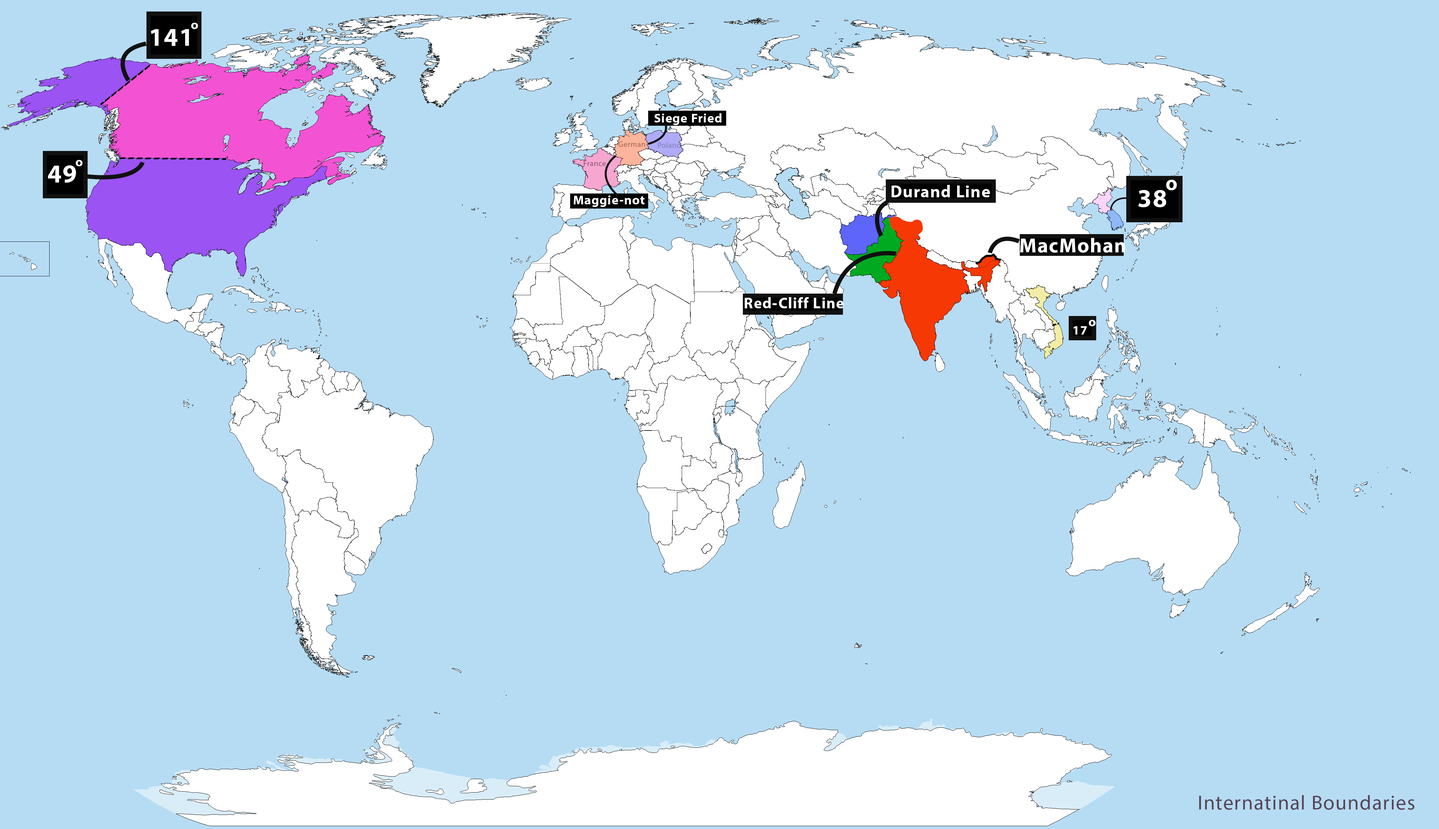
<style>
.page{position:relative;width:1439px;height:829px;background:#b6dcf4}
.page>*{position:absolute;margin:0}
.t1{font:25.6px "MyriadHebrew-Bold";letter-spacing:0.04em;color:#ffffff}
.t2{font:12.8px "MyriadHebrew-Bold";letter-spacing:0.04em;color:#ffffff}
.t3{font:7.7px "MyriadHebrew-Regular";letter-spacing:0.04em;color:#a86b58}
.t4{font:7.7px "MyriadHebrew-Regular";letter-spacing:0.04em;color:#827fbd}
.t5{font:12.8px "MyriadHebrew-Bold";letter-spacing:0.04em;color:#fefefe}
.t6{font:7.7px "MyriadHebrew-Regular";letter-spacing:0.04em;color:#925977}
.t7{font:17.1px "MyriadHebrew-Bold";letter-spacing:0.04em;color:#ffffff}
.t8{font:20.5px "MyriadHebrew-Bold";letter-spacing:0.04em;color:#ffffff}
.t9{font:15.3px "MyriadHebrew-Bold";letter-spacing:0.04em;color:#ffffff}
.t10{font:20.5px "MyriadHebrew-Regular";letter-spacing:0.04em;color:#574455}
</style>
<div class="page">
<p class="t1" style="left:151px;top:29px;width:38px;height:17px">141</p>
<p class="t2" style="left:191px;top:23px;width:7px;height:6px">o</p>
<p class="t2" style="left:654px;top:113px;width:68px;height:12px">Siege Fried</p>
<p class="t3" style="left:618px;top:141px;width:27px;height:6px">German</p>
<p class="t4" style="left:658px;top:142px;width:23px;height:6px">Poland</p>
<p class="t5" style="left:76px;top:160px;width:6px;height:6px">o</p>
<p class="t6" style="left:584px;top:161px;width:22px;height:5px">France</p>
<p class="t1" style="left:48px;top:165px;width:28px;height:18px">49</p>
<p class="t7" style="left:891px;top:185px;width:99px;height:12px">Durand Line</p>
<p class="t8" style="left:1166px;top:180px;width:11px;height:10px">o</p>
<p class="t2" style="left:574px;top:195px;width:71px;height:12px">Maggie-not</p>
<p class="t1" style="left:1138px;top:190px;width:28px;height:17px">38</p>
<p class="t8" style="left:1020px;top:238px;width:105px;height:15px">MacMohan</p>
<p class="t9" style="left:745px;top:297px;width:98px;height:11px">Red-Cliff Line</p>
<p class="t2" style="left:1073px;top:326px;width:14px;height:8px">17</p>
<p class="t2" style="left:1089px;top:320px;width:6px;height:6px">o</p>
<p class="t10" style="left:1199px;top:795px;width:215px;height:15px">Internatinal Boundaries</p>
</div>
